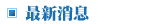
<style>
.page{position:relative;width:150px;height:25px;background:#ffffff}
.page>*{position:absolute;margin:0}
.t1{font:16px "InnMing-Ultra";color:#196fb0}
</style>
<div class="page">
<p class="t1" style="left:25px;top:5px;width:64px;height:16px">最新消息</p>
</div>
